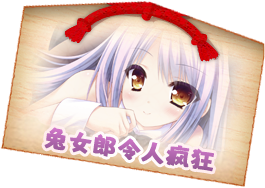
<style>
.page{position:relative;width:265px;height:188px;background:#ffffff}
.page>*{position:absolute;margin:0}
.t1{font:24px "MaokenAssortedSans";color:#b167ae;font-weight:bold}
</style>
<div class="page">
<p class="t1" style="left:44px;top:127px;width:170px;height:45px;rotate:8deg">兔女郎令人疯狂</p>
</div>
